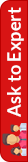
<style>
.page{position:relative;width:28px;height:162px;background:#d81414}
.page>*{position:absolute;margin:0}
.t1{font:18.2px "Lato-Bold";color:#fefefe}
</style>
<div class="page">
<p class="t1" style="left:7px;top:7px;width:17px;height:110px;rotate:-90deg">Ask to Expert</p>
</div>
